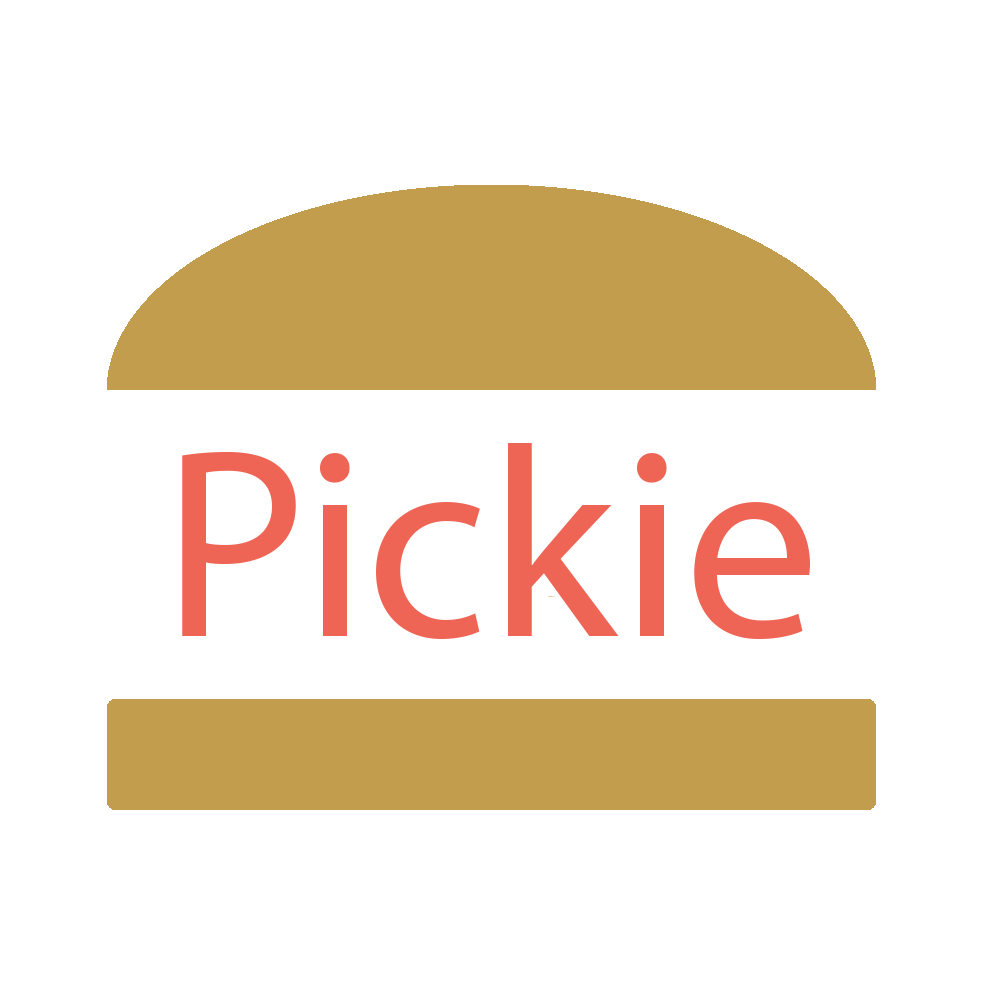
<style>
.page{position:relative;width:1000px;height:1000px;background:#ffffff}
.page>*{position:absolute;margin:0}
.t1{font:271.7px "MyriadPro-Regular";color:#ef6555}
</style>
<div class="page">
<p class="t1" style="left:182px;top:443px;width:628px;height:196px">Pickie</p>
</div>
